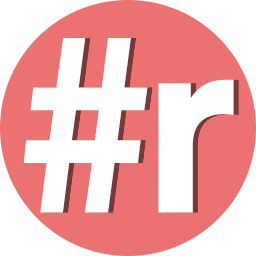
<style>
.page{position:relative;width:256px;height:256px;background:#ec7171}
.page>*{position:absolute;margin:0}
.t1{font:262.5px "CoolveticaRg-Regular";color:#ffffff}
</style>
<div class="page">
<p class="t1" style="left:23px;top:38px;width:211px;height:175px">#r</p>
</div>
